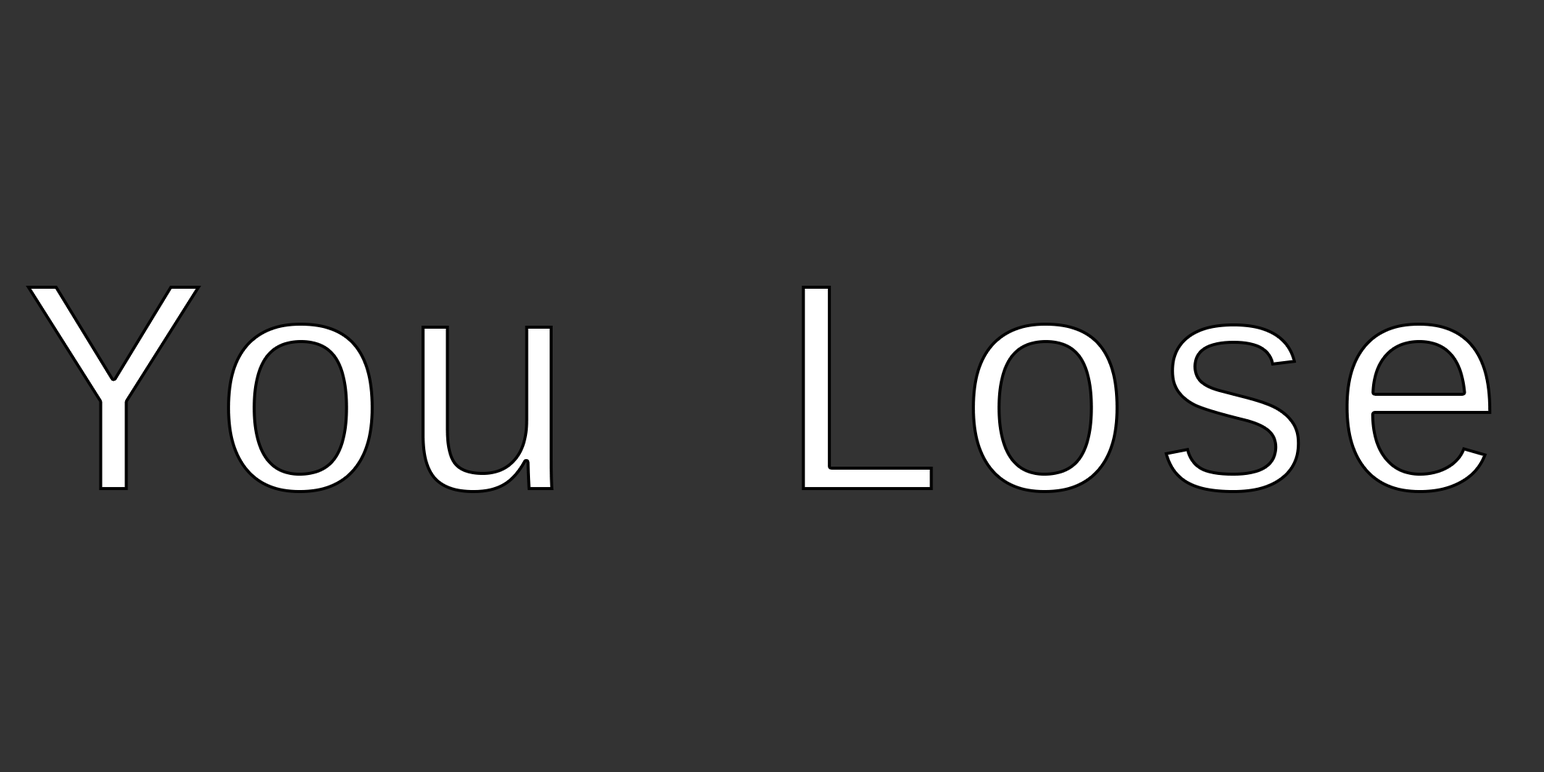
<style>
.page{position:relative;width:1544px;height:772px;background:#333333}
.page>*{position:absolute;margin:0}
.t1{font:310.7px "LiberationMono";color:#ffffff}
</style>
<div class="page">
<p class="t1" style="left:26px;top:286px;width:1466px;height:207px">You Lose</p>
</div>
